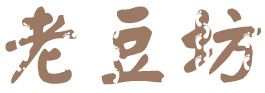
<style>
.page{position:relative;width:265px;height:93px;background:#ffffff}
.page>*{position:absolute;margin:0}
.t1{font:90px "ª÷±öÃC·¢¤j¸}¦L¦r";color:#9c7963}
</style>
<div class="page">
<p class="t1" style="left:5px;top:6px;width:256px;height:79px">老豆坊</p>
</div>
